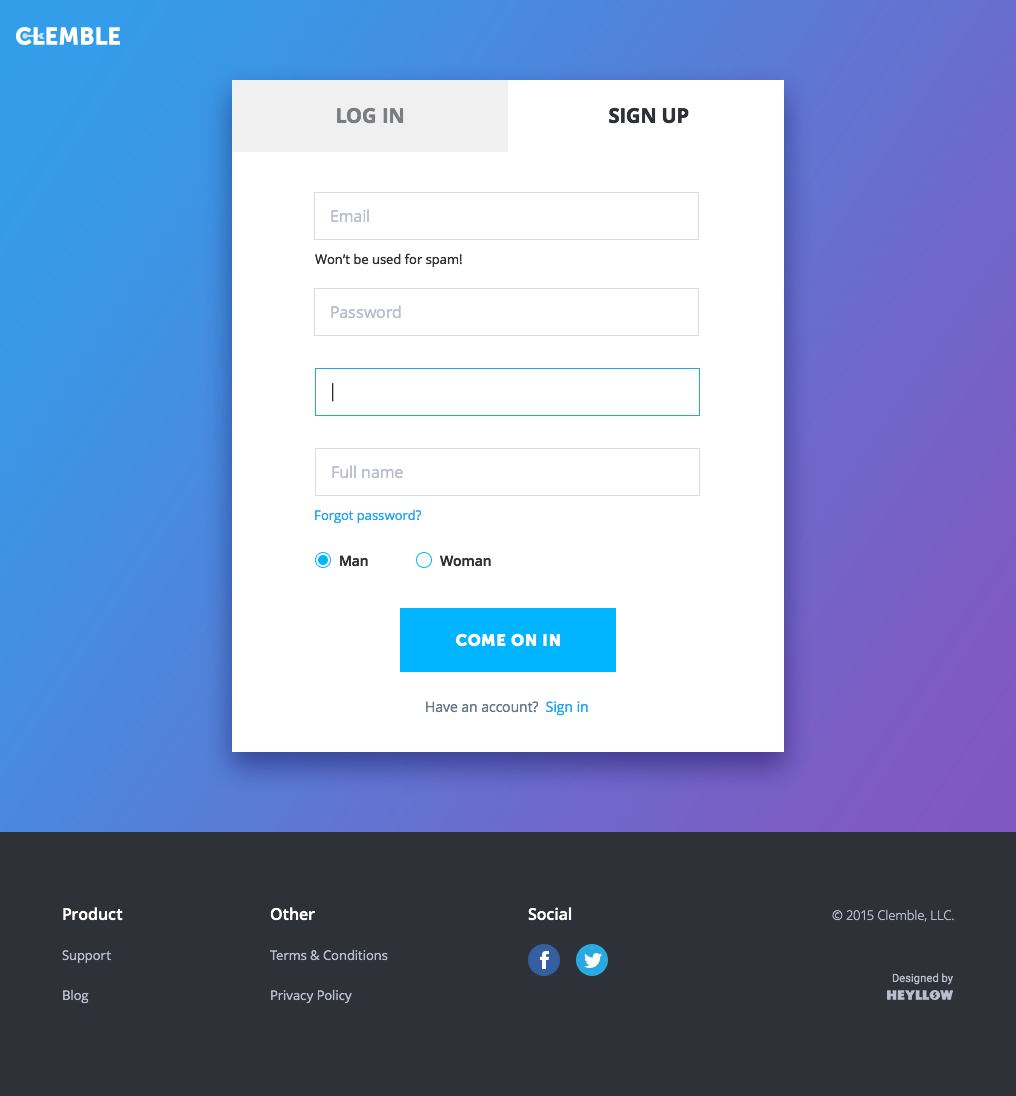
<style>
.page{position:relative;width:1016px;height:1096px;background:#ffffff}
.page>*{position:absolute;margin:0}
.t1{font:20px "OpenSans-Bold";color:#7c7d82;text-transform:uppercase}
.t2{font:20px "OpenSans-Bold";color:#2f3139;text-transform:uppercase}
.t3{font:16px "OpenSans";color:#b9bdcd}
.t4{font:13px "OpenSans";color:#2f3139}
.t5{font:18px "OpenSans-Light";color:#2f3139}
.t6{font:13px "OpenSans";color:#24a6ef}
.t7{font:14px "OpenSans-Semibold";color:#2f3139}
.t8{font:16px "MuseoSans-900";letter-spacing:0.05em;color:#ffffff;text-transform:uppercase}
.t9{font:14px "OpenSans";color:#697889}
.t10{font:14px "OpenSans";color:#24a6ef}
.t11{font:16px "OpenSans-Semibold";color:#ffffff}
.t12{font:13px "OpenSans-Light";color:#b9bdcd}
.t13{font:13px/40px "OpenSans";color:#b9bdcd}
.t14{font:11px "Roboto-Regular";letter-spacing:0.01em;color:#b9bdcd}
</style>
<div class="page">
<p class="t1" style="left:337px;top:107px;width:67px;height:17px">Log in</p>
<p class="t2" style="left:609px;top:107px;width:80px;height:17px">Sign up</p>
<p class="t3" style="left:331px;top:209px;width:38px;height:14px">Email</p>
<p class="t4" style="left:315px;top:253px;width:147px;height:15px">Won’t be used for spam!</p>
<p class="t3" style="left:331px;top:305px;width:70px;height:14px">Password</p>
<p class="t5" style="left:332px;top:383px;width:2px;height:19px">|</p>
<p class="t3" style="left:332px;top:465px;width:71px;height:14px">Full name</p>
<p class="t6" style="left:315px;top:509px;width:107px;height:15px">Forgot password?</p>
<p class="t7" style="left:340px;top:555px;width:28px;height:12px">Man</p>
<p class="t7" style="left:440px;top:555px;width:51px;height:12px">Woman</p>
<p class="t8" style="left:456px;top:633px;width:104px;height:14px">Come on in</p>
<p class="t9" style="left:426px;top:701px;width:162px;height:15px">Have an account?  <span class="t10">Sign in</span></p>
<p class="t11" style="left:63px;top:907px;width:60px;height:14px">Product</p>
<p class="t11" style="left:270px;top:907px;width:45px;height:14px">Other</p>
<p class="t11" style="left:528px;top:907px;width:44px;height:14px">Social</p>
<p class="t12" style="left:832px;top:909px;width:122px;height:13px">© 2015 Clemble, LLC.</p>
<p class="t13" style="left:62px;top:950px;width:49px;height:54px">Support<br>Blog</p>
<p class="t13" style="left:269px;top:949px;width:119px;height:55px">Terms &amp; Conditions<br>Privacy Policy</p>
<p class="t14" style="left:892px;top:973px;width:61px;height:12px">Designed by</p>
</div>
